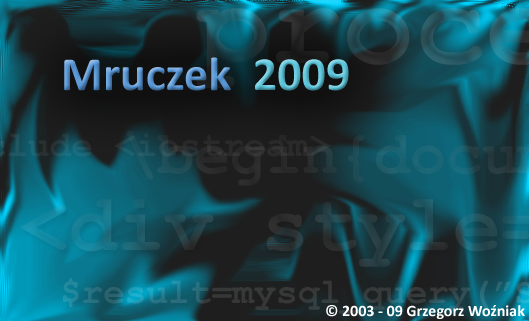
<style>
.page{position:relative;width:529px;height:321px}
.page>*{position:absolute;margin:0}
.t1{font:48px "Calibri-Bold"}
.t2{font:16px "Calibri-Bold";color:#ffffff}
</style>
<div class="page">
<p class="t1" style="left:64px;top:57px;width:285px;height:34px">Mruczek  2009</p>
<p class="t2" style="left:326px;top:305px;width:199px;height:14px">© 2003 - 09 Grzegorz Woźniak</p>
</div>
